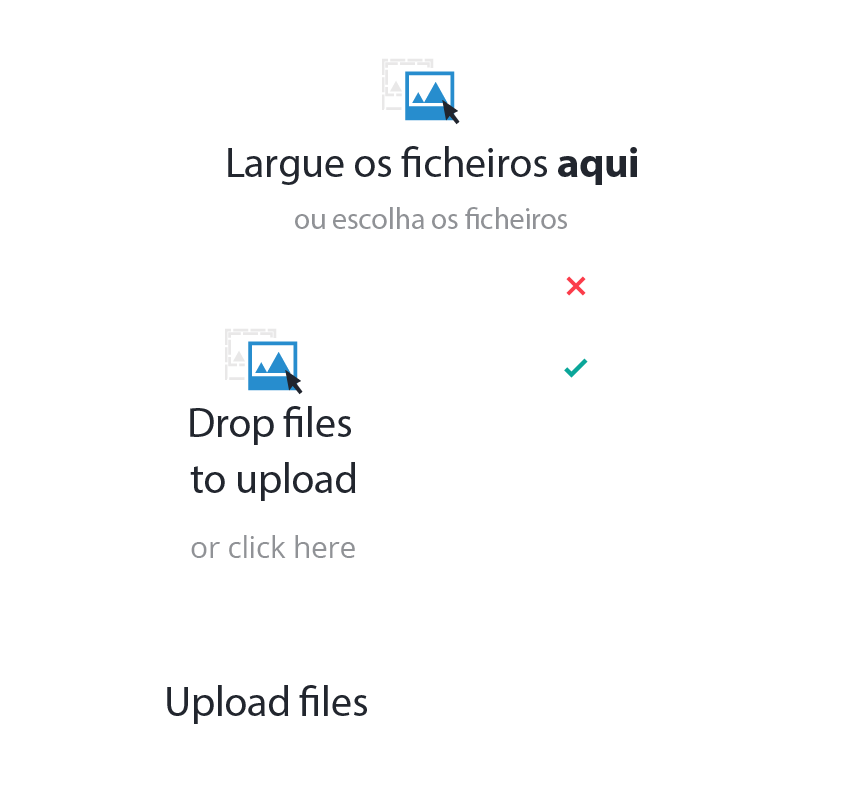
<style>
.page{position:relative;width:856px;height:812px;background:#ffffff}
.page>*{position:absolute;margin:0}
.t1{font:42.6px "MyriadPro-Regular";letter-spacing:-0.01em;color:#22262e}
.t2{font:42.6px "MyriadPro-Bold";letter-spacing:-0.01em;color:#22262e}
.t3{font:30px "MyriadPro-Regular";letter-spacing:-0.01em;color:#909296}
.t4{font:42.6px/56.2px "MyriadPro-Regular";letter-spacing:-0.01em;color:#22262e}
.t5{font:30px "OpenSans";letter-spacing:-0.01em;color:#909296}
</style>
<div class="page">
<p class="t1" style="left:228px;top:146px;width:409px;height:39px">Largue os ficheiros <span class="t2">aqui</span></p>
<p class="t3" style="left:295px;top:207px;width:272px;height:22px">ou escolha os ficheiros</p>
<p class="t4" style="left:190px;top:406px;width:166px;height:95px;text-align:center">Drop files <br>to upload</p>
<p class="t5" style="left:191px;top:535px;width:164px;height:23px">or click here</p>
<p class="t1" style="left:167px;top:685px;width:200px;height:39px">Upload files</p>
</div>
